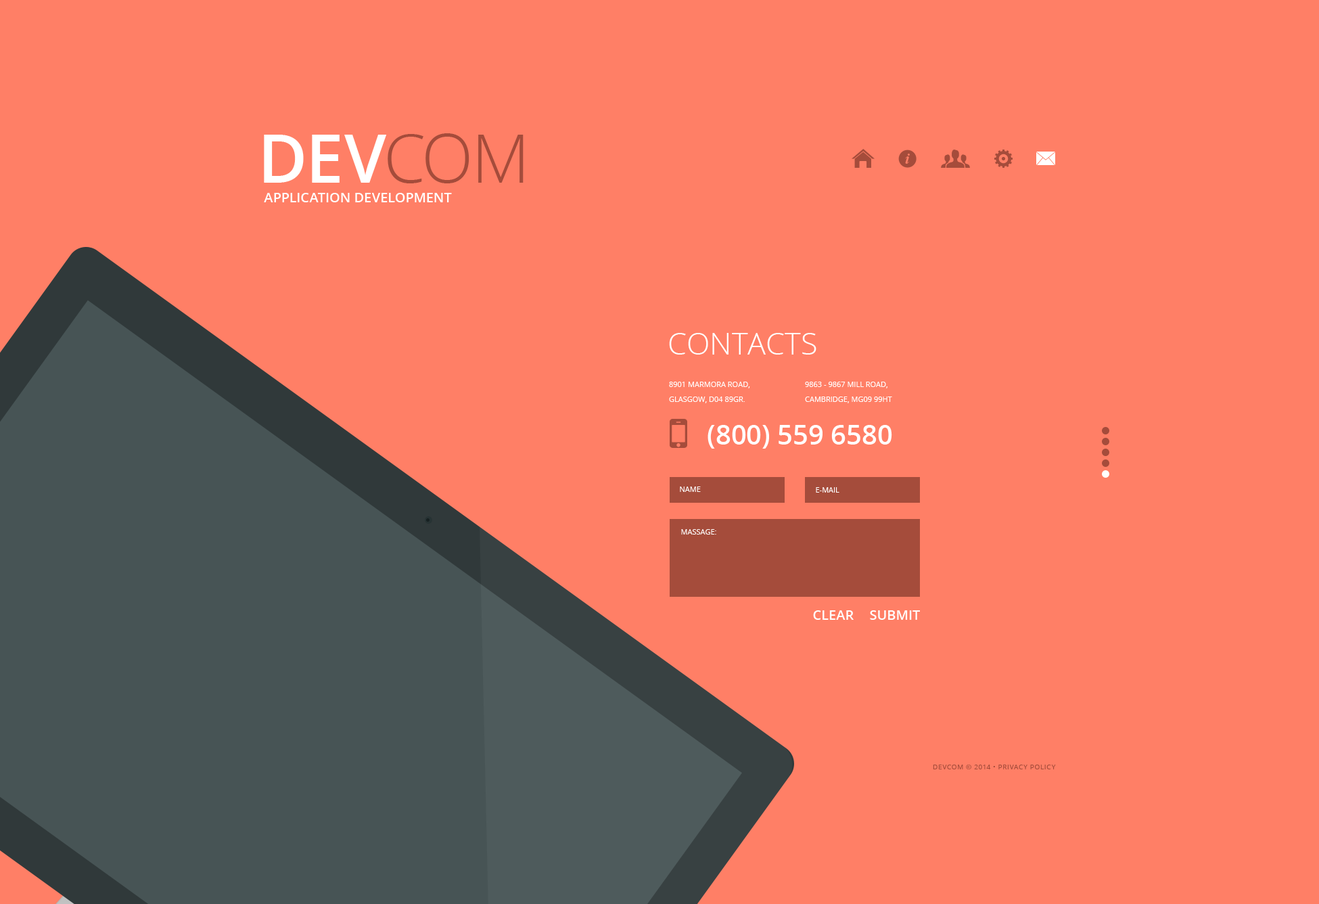
<style>
.page{position:relative;width:1319px;height:904px;background:#ff7f66}
.page>*{position:absolute;margin:0}
.t1{font:67.7px "OpenSans-Semibold";color:#ffffff;text-transform:uppercase}
.t2{font:67.7px "OpenSans-Light";color:#a54c3b;text-transform:uppercase}
.t3{font:13.5px "OpenSans-Semibold";color:#ffffff;text-transform:uppercase}
.t4{font:30.4px "OpenSans-Light";color:#ffffff;text-transform:uppercase}
.t5{font:7.4px/14.9px "OpenSans";color:#ffffff;text-transform:uppercase}
.t6{font:27.1px "OpenSans-Semibold";color:#ffffff}
.t7{font:7.4px "OpenSans";color:#ffffff;text-transform:uppercase}
.t8{font:6.8px "OpenSans";letter-spacing:0.06em;color:#a54c3b;text-transform:uppercase}
</style>
<div class="page">
<p class="t1" style="left:264px;top:133px;width:260px;height:50px">Dev<span class="t2">com</span></p>
<p class="t3" style="left:264px;top:193px;width:188px;height:9px">application development</p>
<p class="t4" style="left:669px;top:333px;width:148px;height:22px">Contacts</p>
<p class="t5" style="left:669px;top:382px;width:81px;height:21px">8901 Marmora Road,<br>Glasgow, D04 89GR.</p>
<p class="t5" style="left:805px;top:382px;width:87px;height:21px">9863 - 9867 Mill Road, <br>Cambridge, MG09 99HT</p>
<p class="t6" style="left:708px;top:425px;width:184px;height:24px">(800) 559 6580</p>
<p class="t7" style="left:680px;top:486px;width:21px;height:6px">name</p>
<p class="t7" style="left:816px;top:487px;width:24px;height:6px">e-mail</p>
<p class="t7" style="left:681px;top:529px;width:35px;height:5px">massage:</p>
<p class="t3" style="left:813px;top:610px;width:41px;height:10px">Clear</p>
<p class="t3" style="left:870px;top:610px;width:50px;height:10px">submit</p>
<p class="t8" style="left:933px;top:764px;width:123px;height:5px">devcom © 2014 • Privacy Policy</p>
</div>
